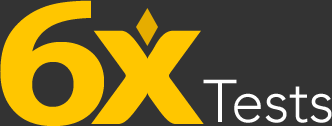
<style>
.page{position:relative;width:332px;height:126px;background:#333333}
.page>*{position:absolute;margin:0}
.t1{font:177.8px "BookmanOldStyle-Bold";letter-spacing:-0.1em;color:#ffc600}
.t2{font:177.8px "Aquawax-Black";letter-spacing:-0.1em;color:#ffc600}
.t3{font:59.7px "Avenir-Light";color:#ffffff}
</style>
<div class="page">
<p class="t1" style="left:0px;top:0px;width:104px;height:126px">6</p>
<p class="t2" style="left:91px;top:30px;width:113px;height:94px">x</p>
<p class="t3" style="left:203px;top:79px;width:129px;height:44px">Tests</p>
</div>
